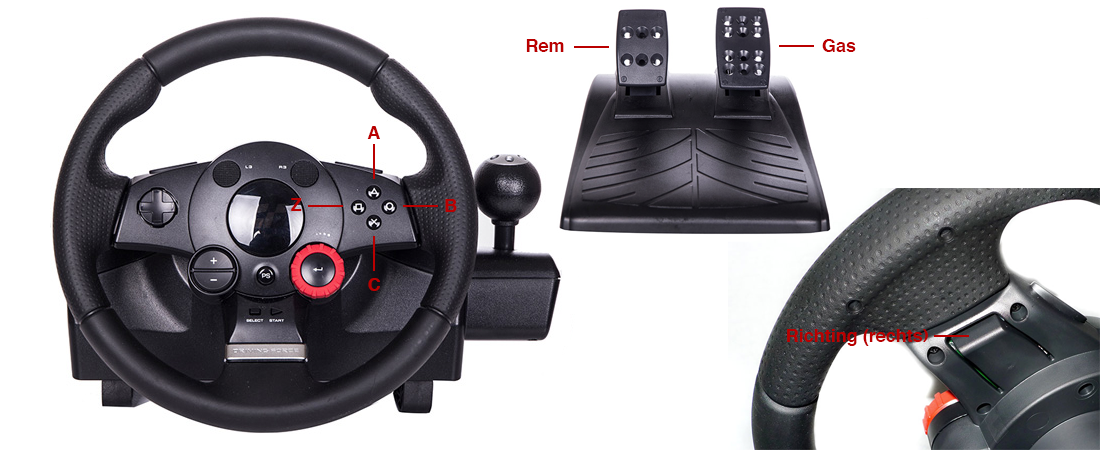
<style>
.page{position:relative;width:1100px;height:450px;background:#ffffff}
.page>*{position:absolute;margin:0}
.t1{font:18px "Helvetica-Bold";color:#ba0000}
</style>
<div class="page">
<p class="t1" style="left:526px;top:39px;width:38px;height:13px">Rem</p>
<p class="t1" style="left:822px;top:39px;width:34px;height:13px">Gas</p>
<p class="t1" style="left:367px;top:126px;width:13px;height:13px">A</p>
<p class="t1" style="left:291px;top:198px;width:11px;height:13px">Z</p>
<p class="t1" style="left:445px;top:199px;width:12px;height:13px">B</p>
<p class="t1" style="left:368px;top:278px;width:12px;height:13px">C</p>
<p class="t1" style="left:787px;top:329px;width:141px;height:17px">Richting (rechts)</p>
</div>
